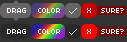
<style>
.page{position:relative;width:127px;height:42px;background:#333333}
.page>*{position:absolute;margin:0}
.t1{font:8px "04b03";color:#ffffff}
</style>
<div class="page">
<p class="t1" style="left:7px;top:8px;width:19px;height:5px">DRAG</p>
<p class="t1" style="left:38px;top:8px;width:22px;height:5px">COLOR</p>
<p class="t1" style="left:87px;top:8px;width:4px;height:5px">X</p>
<p class="t1" style="left:101px;top:8px;width:23px;height:5px">SURE?</p>
<p class="t1" style="left:7px;top:29px;width:19px;height:5px">DRAG</p>
<p class="t1" style="left:38px;top:29px;width:22px;height:5px">COLOR</p>
<p class="t1" style="left:87px;top:29px;width:4px;height:5px">X</p>
<p class="t1" style="left:101px;top:29px;width:23px;height:5px">SURE?</p>
</div>
